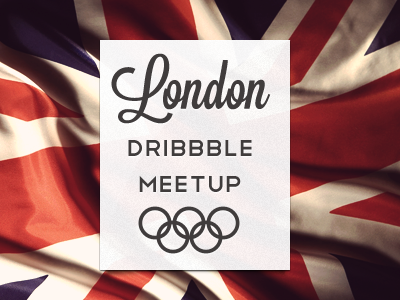
<style>
.page{position:relative;width:400px;height:300px}
.page>*{position:absolute;margin:0}
.t1{font:62px "Lavanderia-Sturdy";color:#403c3c}
.t2{font:30px "Telegrafico";color:#403c3c}
</style>
<div class="page">
<p class="t1" style="left:111px;top:53px;width:160px;height:71px">London</p>
<p class="t2" style="left:128px;top:140px;width:124px;height:52px;text-align:center">Dribbble Meetup</p>
</div>
